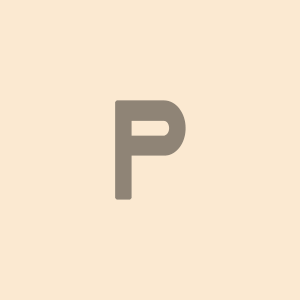
<style>
.page{position:relative;width:300px;height:300px;background:#fbe9d1}
.page>*{position:absolute;margin:0}
.t1{font:136.7px "AzonixRegular";color:#8f8476;font-weight:bold;scale:0.78 1}
</style>
<div class="page">
<p class="t1" style="left:115px;top:100px;width:71px;height:100px">P</p>
</div>
